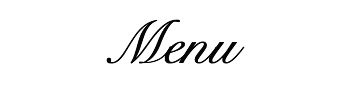
<style>
.page{position:relative;width:337px;height:98px;background:#ffffff}
.page>*{position:absolute;margin:0}
.t1{font:59.3px "SnellRoundhand";color:#060606}
</style>
<div class="page">
<p class="t1" style="left:106px;top:19px;width:139px;height:45px">Menu</p>
</div>
